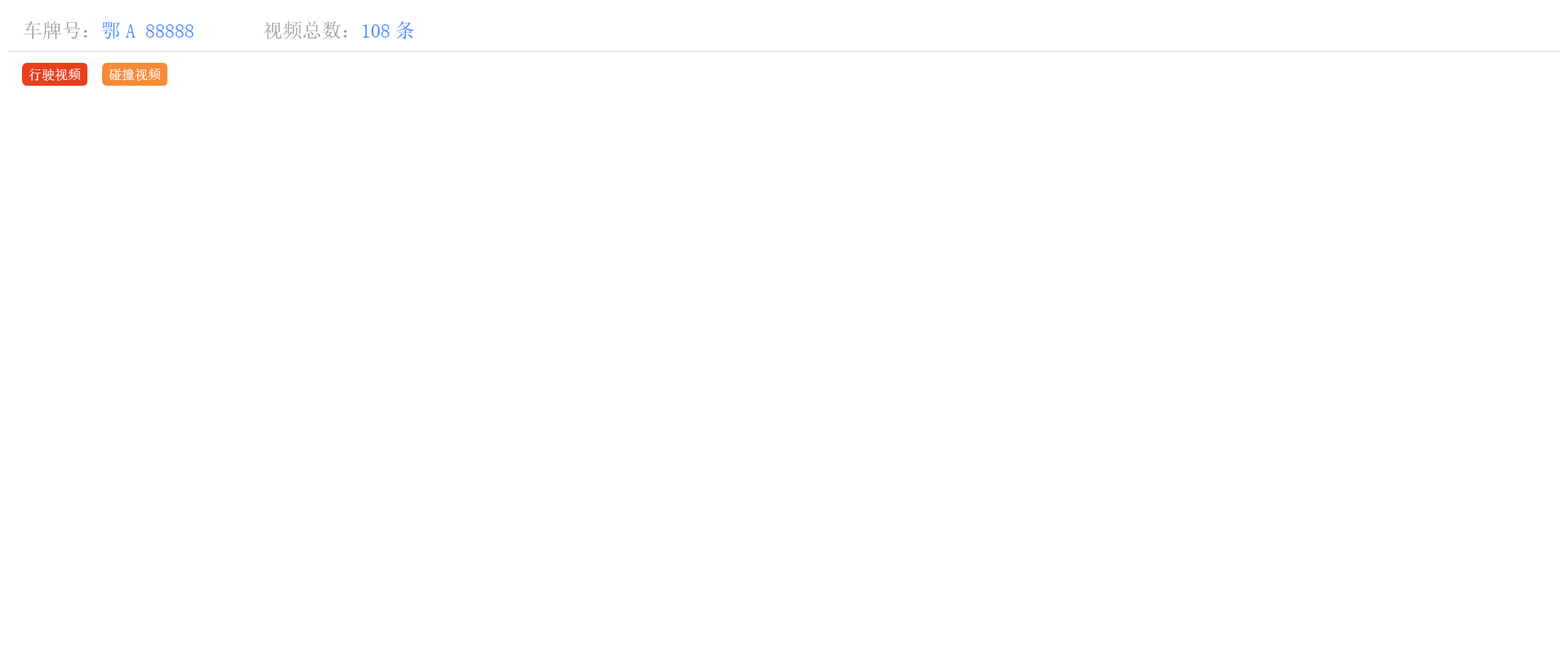
<style>
.page{position:relative;width:1568px;height:653px;background:#ffffff}
.page>*{position:absolute;margin:0}
.t1{font:19.6px "SimSun";color:#3385ff}
.t2{font:19.6px "SimSun";color:#9c9c9c}
.t3{font:13.1px "SimSun";color:#fffefe}
</style>
<div class="page">
<p class="t1" style="left:24px;top:21px;width:170px;height:18px"><span class="t2">车牌号：</span>鄂A 88888</p>
<p class="t2" style="left:264px;top:21px;width:150px;height:18px">视频总数：<span class="t1">108条</span></p>
<p class="t3" style="left:29px;top:69px;width:52px;height:12px">行驶视频</p>
<p class="t3" style="left:109px;top:68px;width:52px;height:13px">碰撞视频</p>
</div>
